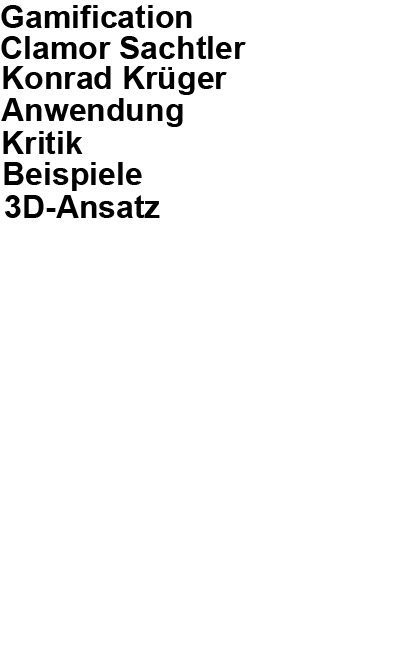
<style>
.page{position:relative;width:416px;height:672px;background:#ffffff}
.page>*{position:absolute;margin:0}
.t1{font:32px "Arial-BoldMT";color:#000000}
</style>
<div class="page">
<p class="t1" style="left:1px;top:5px;width:191px;height:23px">Gamification</p>
<p class="t1" style="left:1px;top:36px;width:245px;height:23px">Clamor Sachtler</p>
<p class="t1" style="left:3px;top:66px;width:224px;height:29px">Konrad Krüger</p>
<p class="t1" style="left:1px;top:98px;width:182px;height:29px">Anwendung</p>
<p class="t1" style="left:3px;top:131px;width:80px;height:23px">Kritik</p>
<p class="t1" style="left:4px;top:162px;width:138px;height:29px">Beispiele</p>
<p class="t1" style="left:5px;top:195px;width:155px;height:23px">3D-Ansatz</p>
</div>
